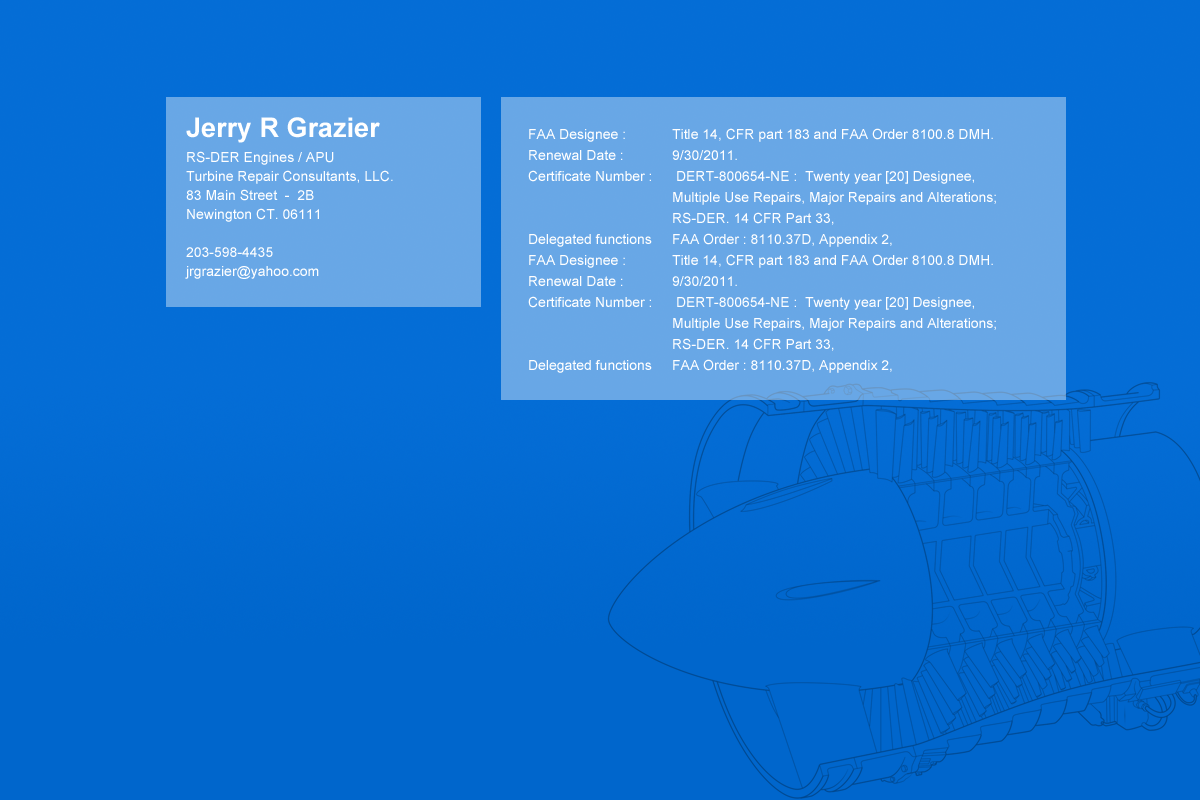
<style>
.page{position:relative;width:1200px;height:800px}
.page>*{position:absolute;margin:0}
.t1{font:14px/19px "ArialMT";color:#ffffff}
.t2{font:27px/31px "Arial-BoldMT";color:#ffffff}
.t3{font:14px/25px "ArialMT";color:#ffffff}
.t4{font:14px/21px "ArialMT";color:#ffffff}
</style>
<div class="page">
<p class="t1" style="left:185px;top:117px;width:208px;height:162px"><span class="t2">Jerry R Grazier<br></span><span class="t3">RS-DER Engines / APU<br></span>Turbine Repair Consultants, LLC.<br>83 Main Street  -  2B<br>Newington CT. 06111<br><br>203-598-4435<br>jrgrazier@yahoo.com</p>
<p class="t4" style="left:528px;top:128px;width:468px;height:245px">FAA Designee :   Title 14, CFR part 183 and FAA Order 8100.8 DMH. <br>Renewal Date :    9/30/2011.<br>Certificate Number :  DERT-800654-NE :  Twenty year [20] Designee,<br>    Multiple Use Repairs, Major Repairs and Alterations; <br>    RS-DER. 14 CFR Part 33, <br>Delegated functions  FAA Order : 8110.37D, Appendix 2,<br>FAA Designee :   Title 14, CFR part 183 and FAA Order 8100.8 DMH. <br>Renewal Date :    9/30/2011.<br>Certificate Number :  DERT-800654-NE :  Twenty year [20] Designee,<br>    Multiple Use Repairs, Major Repairs and Alterations; <br>    RS-DER. 14 CFR Part 33, <br>Delegated functions  FAA Order : 8110.37D, Appendix 2,</p>
</div>
